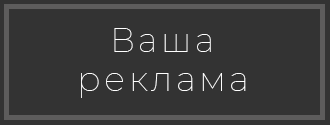
<style>
.page{position:relative;width:330px;height:125px;background:#333333}
.page>*{position:absolute;margin:0}
.t1{font:33.6px "Montserrat-Thin";letter-spacing:0.1em;color:#ffffff}
.t2{font:34.7px "Montserrat-Thin";letter-spacing:0.1em;color:#ffffff}
</style>
<div class="page">
<p class="t1" style="left:114px;top:28px;width:97px;height:24px">Ваша</p>
<p class="t2" style="left:81px;top:73px;width:165px;height:25px">реклама</p>
</div>
